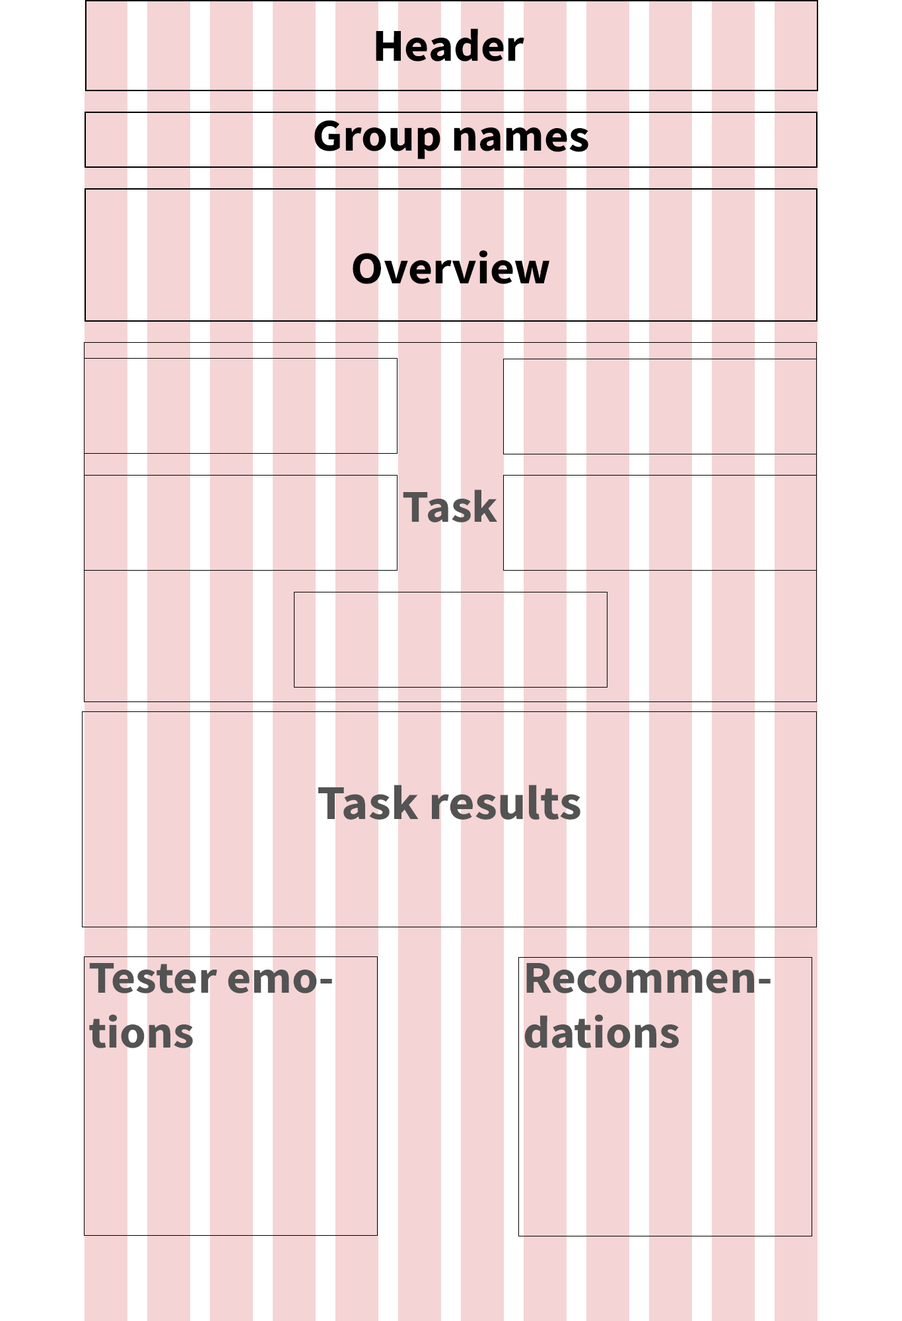
<style>
.page{position:relative;width:902px;height:1321px;background:#f5d4d5}
.page>*{position:absolute;margin:0}
.t1{font:45.7px "SourceSansRoman-Bold";color:#000000;scale:1.04 1}
.t2{font:45.7px "SourceSansRoman-Bold";color:#535353;scale:1.04 1}
.t3{font:48.7px "SourceSansRoman-Bold";color:#535353;scale:1.04 1}
</style>
<div class="page">
<p class="t1" style="left:376px;top:28px;width:149px;height:33px">Header</p>
<p class="t1" style="left:314px;top:120px;width:275px;height:39px">Group names</p>
<p class="t1" style="left:353px;top:250px;width:197px;height:34px">Overview</p>
<p class="t2" style="left:403px;top:490px;width:94px;height:33px">Task</p>
<p class="t3" style="left:318px;top:785px;width:263px;height:35px">Task results</p>
<p class="t2" style="left:89px;top:963px;width:243px;height:85px">Tester emotions</p>
<p class="t2" style="left:525px;top:963px;width:246px;height:85px">Recommendations</p>
</div>
